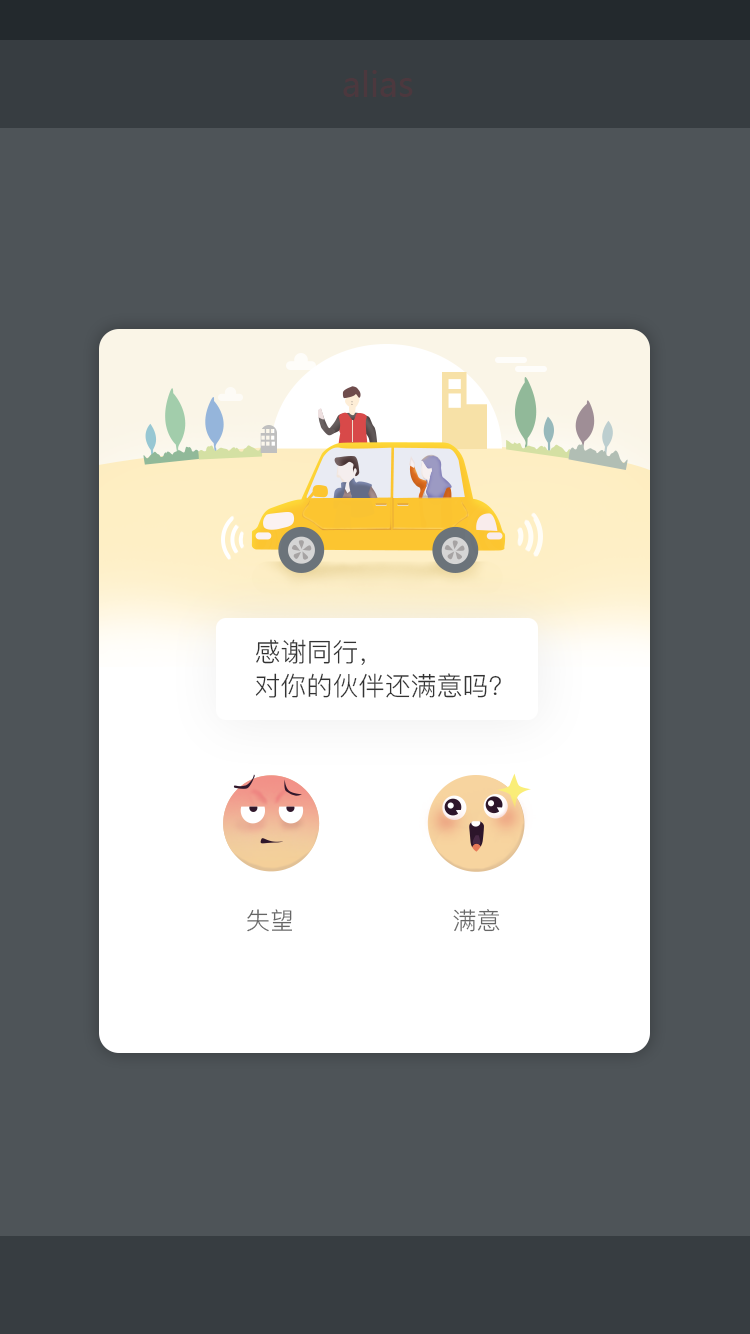
<style>
.page{position:relative;width:750px;height:1334px;background:#4e5458}
.page>*{position:absolute;margin:0}
.t1{font:34px "MicrosoftYaHei";color:#4c383e}
.t2{font:26px/34px "PingFang-SC-Regular";color:#333333}
.t3{font:24px "PingFang-SC-Regular";color:#666666}
</style>
<div class="page">
<p class="t1" style="left:343px;top:70px;width:70px;height:27px">alias</p>
<p class="t2" style="left:255px;top:639px;width:246px;height:59px">感谢同行，<br>对你的伙伴还满意吗?</p>
<p class="t3" style="left:247px;top:909px;width:45px;height:23px">失望</p>
<p class="t3" style="left:453px;top:909px;width:47px;height:23px">满意</p>
</div>
